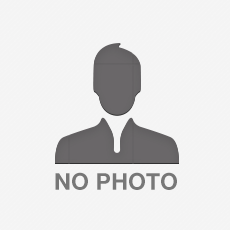
<style>
.page{position:relative;width:230px;height:230px;background:#f4f4f4}
.page>*{position:absolute;margin:0}
.t1{font:23.2px "HelveticaNeue-Bold";color:#777777}
</style>
<div class="page">
<p class="t1" style="left:55px;top:172px;width:122px;height:18px">NO PHOTO</p>
</div>
